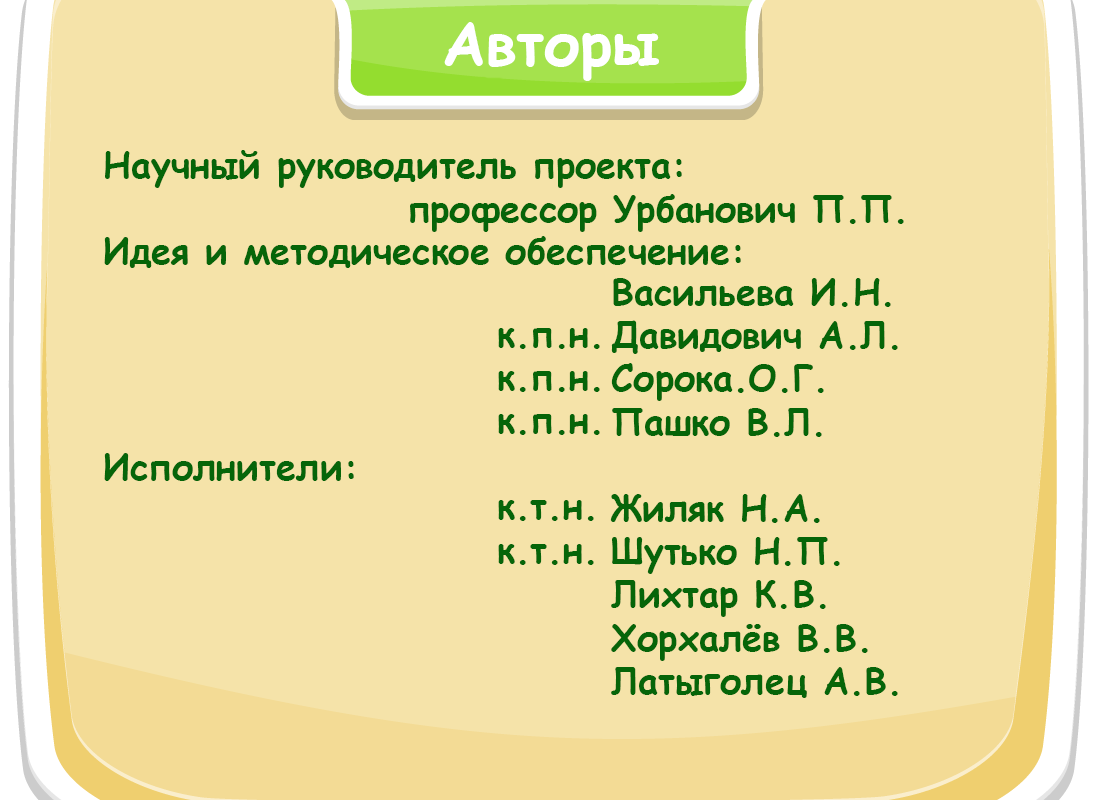
<style>
.page{position:relative;width:1093px;height:800px;background:#f5e3a9}
.page>*{position:absolute;margin:0}
.t1{font:36px "ComicSansMS-Bold";color:#066509}
</style>
<div class="page">
<p class="t1" style="left:104px;top:150px;width:637px;height:331px">Научный руководитель проекта:<br><br>Идея и методическое обеспечение:<br><br><br><br><br>Исполнители:</p>
<p class="t1" style="left:410px;top:194px;width:494px;height:38px">профессор Урбанович П.П.</p>
<p class="t1" style="left:610px;top:278px;width:288px;height:420px">Васильева И.Н.<br>Давидович А.Л.<br>Сорока.О.Г.<br>Пашко В.Л.<br><br>Жиляк Н.А.<br>Шутько Н.П.<br>Лихтар К.В.<br>Хорхалёв В.В.<br>Латыголец А.В.</p>
<p class="t1" style="left:498px;top:328px;width:102px;height:237px">к.п.н.<br>к.п.н.<br>к.п.н.<br><br>к.т.н.<br>к.т.н.</p>
</div>
